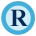
<style>
.page{position:relative;width:36px;height:36px;background:#ffffff}
.page>*{position:absolute;margin:0}
.t1{font:24.3px "TimesNewRomanPS-BoldMT";color:#0a2855}
</style>
<div class="page">
<p class="t1" style="left:10px;top:9px;width:18px;height:17px">R</p>
</div>
